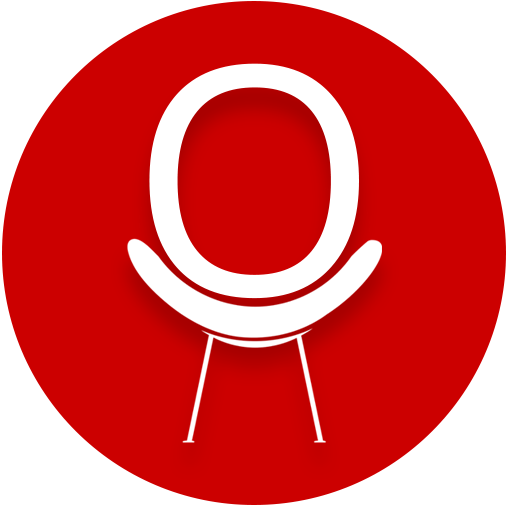
<style>
.page{position:relative;width:512px;height:512px;background:#cc0000}
.page>*{position:absolute;margin:0}
.t1{font:318.8px "OpenSans";color:#ffffff}
</style>
<div class="page">
<p class="t1" style="left:149px;top:63px;width:210px;height:236px">O</p>
</div>
